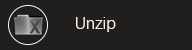
<style>
.page{position:relative;width:192px;height:50px;background:#211f1e}
.page>*{position:absolute;margin:0}
.t1{font:16.7px "DengXian";color:#f6ede9}
</style>
<div class="page">
<p class="t1" style="left:76px;top:17px;width:40px;height:15px">Unzip</p>
</div>
